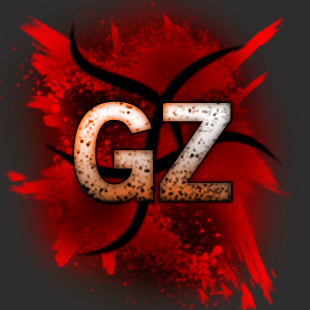
<style>
.page{position:relative;width:310px;height:310px}
.page>*{position:absolute;margin:0}
.t1{font:131.8px "OldSansBlack"}
</style>
<div class="page">
<p class="t1" style="left:74px;top:101px;width:157px;height:102px">GZ</p>
</div>
